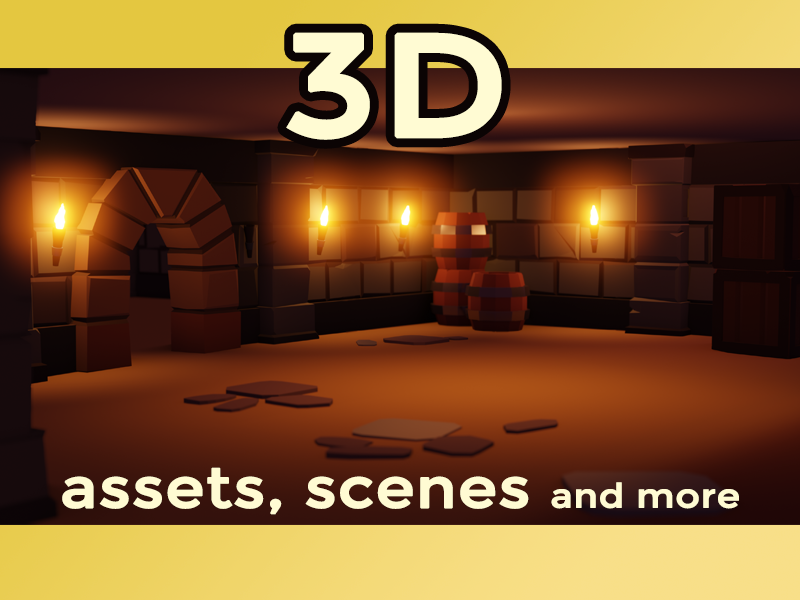
<style>
.page{position:relative;width:800px;height:600px}
.page>*{position:absolute;margin:0}
.t1{font:144.6px "Montserrat-Regular";color:#fffbd3;font-weight:bold;scale:1.12 1}
.t2{font:55.6px "Montserrat-Regular";color:#fffbd3;font-weight:bold;scale:1.12 1}
.t3{font:33.4px "Montserrat-Regular";color:#fffbd3;font-weight:bold;scale:1.12 1}
</style>
<div class="page">
<p class="t1" style="left:286px;top:32px;width:216px;height:108px">3D</p>
<p class="t2" style="left:62px;top:467px;width:677px;height:48px">assets, scenes <span class="t3">and more</span></p>
</div>
